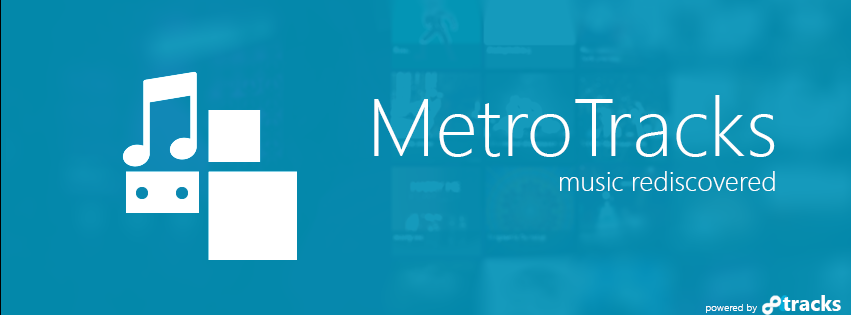
<style>
.page{position:relative;width:851px;height:315px}
.page>*{position:absolute;margin:0}
.t1{font:82.4px "SegoeUI-Light";color:#ffffff}
.t2{font:27.5px "SegoeUI-Light";color:#ffffff}
.t3{font:10.4px "SegoeUI-Light";color:#ffffff}
.t4{font:21px "SegoeUI-Bold";color:#ffffff}
</style>
<div class="page">
<p class="t1" style="left:374px;top:95px;width:401px;height:62px">MetroTracks</p>
<p class="t2" style="left:560px;top:171px;width:215px;height:20px">music rediscovered</p>
<p class="t3" style="left:706px;top:304px;width:51px;height:9px">powered by</p>
<p class="t4" style="left:782px;top:295px;width:59px;height:16px">tracks</p>
</div>
